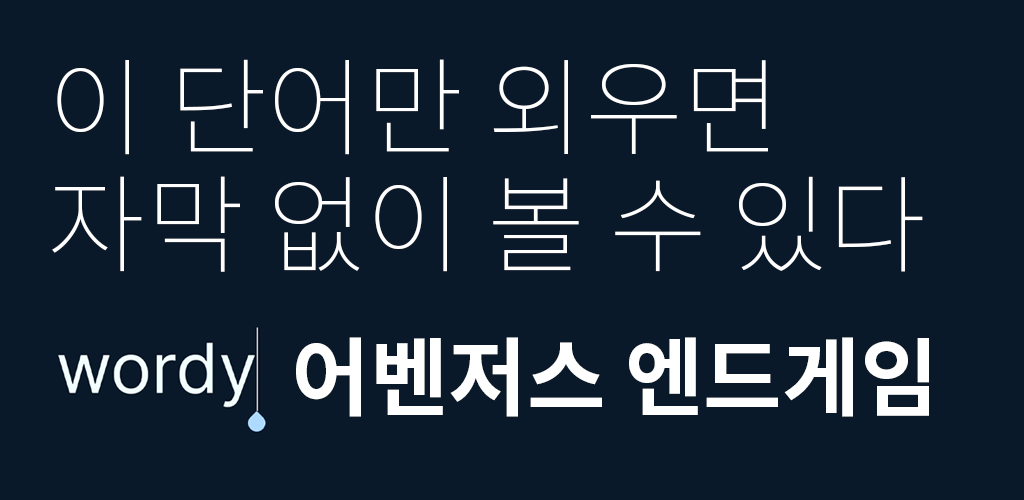
<style>
.page{position:relative;width:1024px;height:500px;background:#091929}
.page>*{position:absolute;margin:0}
.t1{font:106.7px/117.3px "NotoSansKR-Thin";color:#ffffff}
.t2{font:85.3px "NotoSansKR-Bold";color:#ffffff}
</style>
<div class="page">
<p class="t1" style="left:52px;top:59px;width:871px;height:213px">이 단어만 외우면 <br>자막 없이 볼 수 있다</p>
<p class="t2" style="left:296px;top:337px;width:633px;height:80px">어벤저스 엔드게임</p>
</div>
